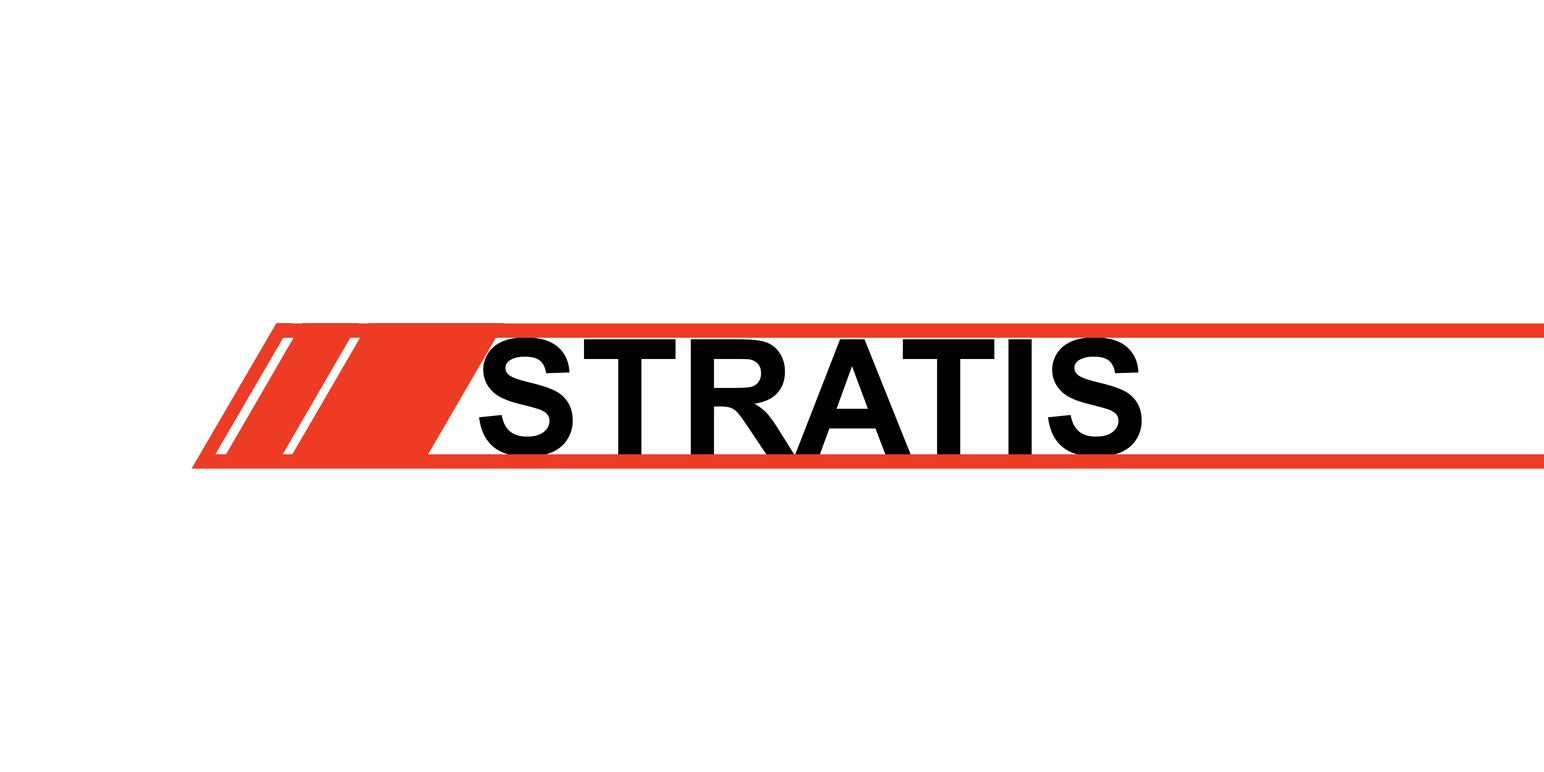
<style>
.page{position:relative;width:1544px;height:772px;background:#ffffff}
.page>*{position:absolute;margin:0}
.t1{font:160.9px "Arial-BoldMT";color:#000000}
</style>
<div class="page">
<p class="t1" style="left:479px;top:337px;width:663px;height:120px">STRATIS</p>
</div>
